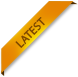
<style>
.page{position:relative;width:78px;height:77px;background:#ffffff}
.page>*{position:absolute;margin:0}
.t1{font:11.6px "MyriadPro-Regular";color:#7d4700;font-weight:bold}
</style>
<div class="page">
<p class="t1" style="left:15px;top:17px;width:30px;height:31px;rotate:-45deg">LATEST</p>
</div>
